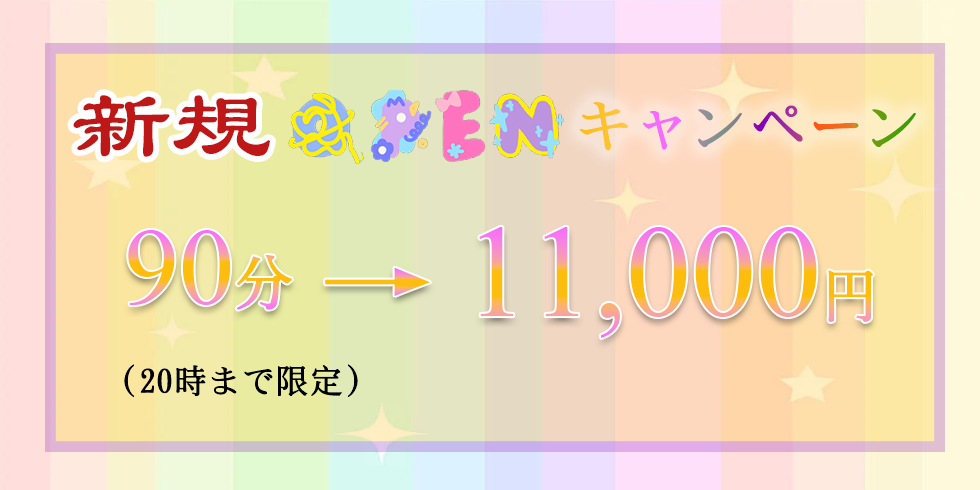
<style>
.page{position:relative;width:980px;height:490px}
.page>*{position:absolute;margin:0}
.t1{font:100px "STBaoliSC-Regular";color:#be1717}
.t2{font:58px "SimSong-Bold"}
.t3{font:110px "TimesNewRomanPSMT"}
.t4{font:60px "SimSong-Bold"}
.t5{font:130px "TimesNewRomanPSMT"}
.t6{font:75px "STSongti-SC-Black";scale:1.54 1}
.t7{font:34px "SimSong-Bold";color:#000000}
</style>
<div class="page">
<p class="t1" style="left:73px;top:95px;width:197px;height:62px">新規</p>
<p class="t2" style="left:580px;top:102px;width:336px;height:49px">キャンペーン</p>
<p class="t3" style="left:128px;top:230px;width:164px;height:80px">90<span class="t4">分</span></p>
<p class="t5" style="left:479px;top:227px;width:394px;height:111px">11,000<span class="t2">円</span></p>
<p class="t6" style="left:325px;top:267px;width:106px;height:29px">→</p>
<p class="t7" style="left:124px;top:364px;width:234px;height:33px">（20時まで限定）</p>
</div>
